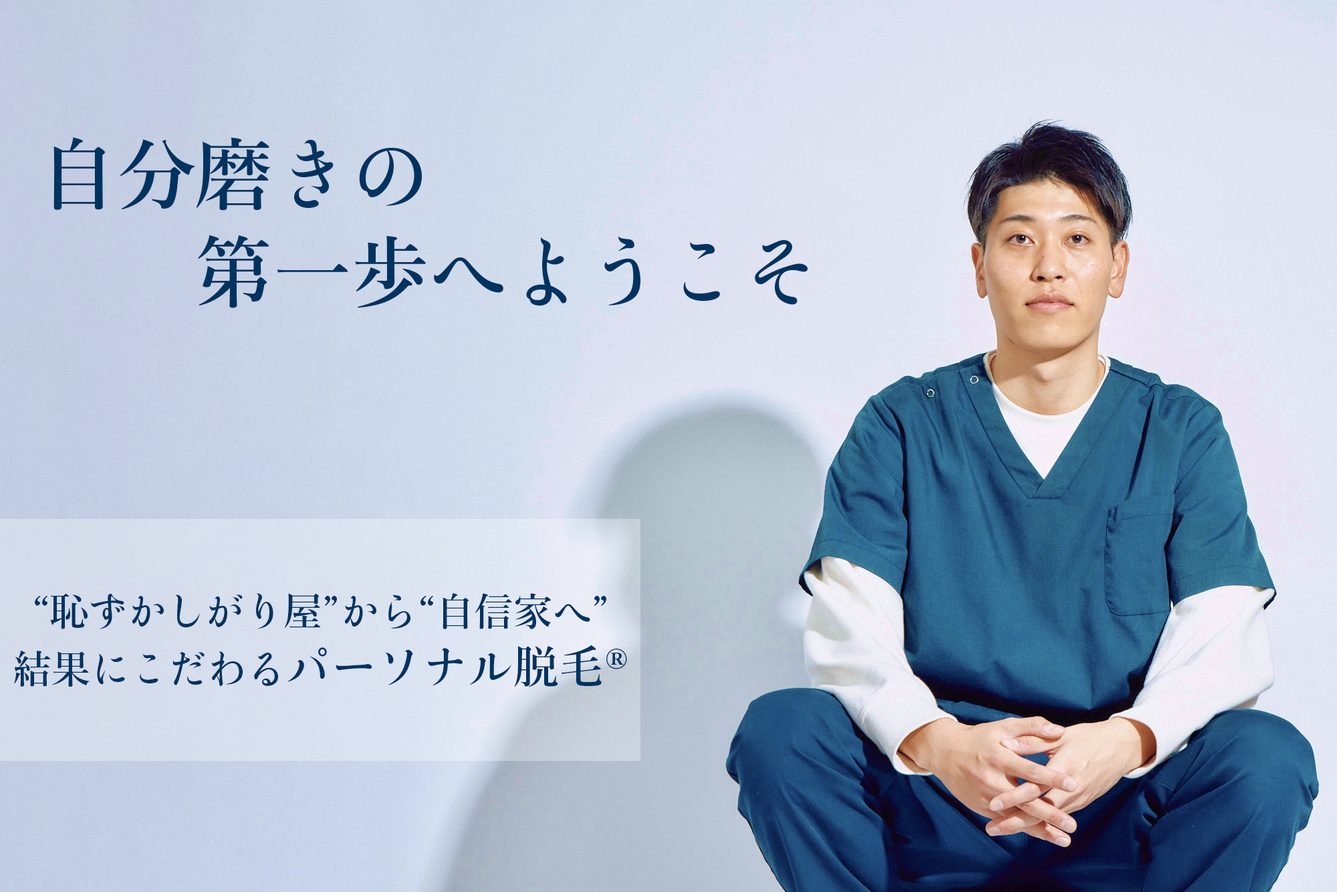
<style>
.page{position:relative;width:1337px;height:892px}
.page>*{position:absolute;margin:0}
.t1{font:78px/97.5px "YuMin_36pKn-Demibold";color:#003360}
.t2{font:39px/52px "YuMin_36pKn-Demibold";color:#003360}
.t3{font:45.5px/52px "YuMin_36pKn-Demibold";color:#003360}
</style>
<div class="page">
<p class="t1" style="left:53px;top:137px;width:755px;height:171px;text-align:center">自分磨きの<br>　　　　　　　第一歩へようこそ</p>
<p class="t2" style="left:14px;top:593px;width:613px;height:94px;text-align:center">“恥ずかしがり屋”から“自信家へ”<br>結果にこだわる<span class="t3">パーソナル脱毛®</span></p>
</div>
